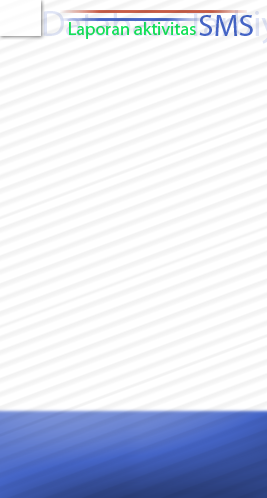
<style>
.page{position:relative;width:267px;height:498px;background:#ffffff}
.page>*{position:absolute;margin:0}
.t1{font:31.2px "MyriadPro-Regular";color:#4565c7}
.t2{font:18.2px "MyriadPro-Regular";color:#13e257}
</style>
<div class="page">
<p class="t1" style="left:199px;top:15px;width:54px;height:21px">SMS</p>
<p class="t2" style="left:69px;top:22px;width:127px;height:17px">Laporan aktivitas</p>
</div>
